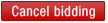
<style>
.page{position:relative;width:108px;height:23px;background:#ffffff}
.page>*{position:absolute;margin:0}
.t1{font:14px "HelveticaNeueRegular";letter-spacing:0.04em;color:#ffffff}
</style>
<div class="page">
<p class="t1" style="left:12px;top:5px;width:83px;height:14px">Cancel bidding</p>
</div>
